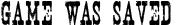
<style>
.page{position:relative;width:180px;height:25px;background:#ffffff}
.page>*{position:absolute;margin:0}
.t1{font:30px "Nashville";color:#000000}
</style>
<div class="page">
<p class="t1" style="left:1px;top:1px;width:170px;height:25px">game was saved</p>
</div>
